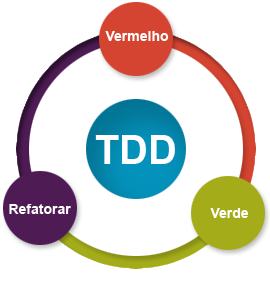
<style>
.page{position:relative;width:270px;height:282px;background:#ffffff}
.page>*{position:absolute;margin:0}
.t1{font:14px "Arial-BoldMT";color:#ffffff}
.t2{font:39.6px "Arial-BoldMT";color:#ffffff}
</style>
<div class="page">
<p class="t1" style="left:105px;top:31px;width:64px;height:10px">Vermelho</p>
<p class="t2" style="left:95px;top:135px;width:80px;height:29px">TDD</p>
<p class="t1" style="left:9px;top:204px;width:62px;height:10px">Refatorar</p>
<p class="t1" style="left:210px;top:208px;width:39px;height:10px">Verde</p>
</div>
